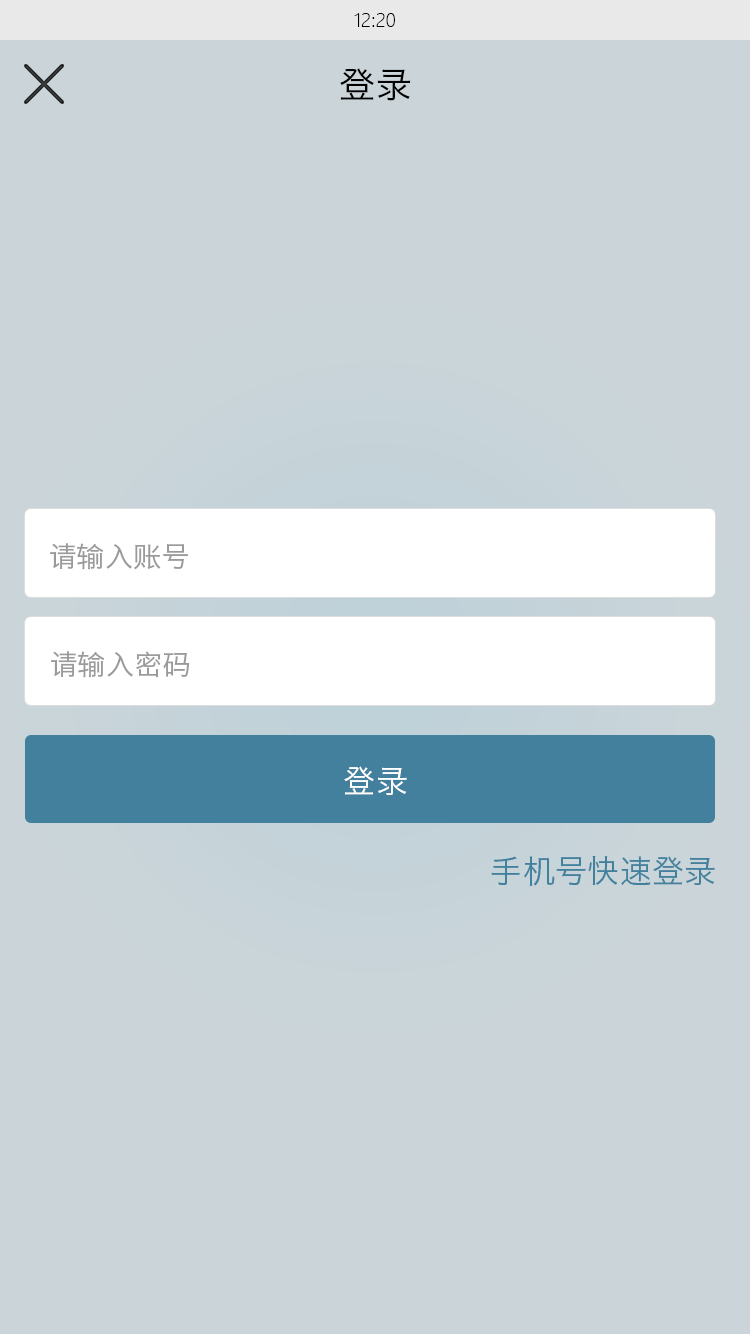
<style>
.page{position:relative;width:750px;height:1334px;background:#cbd5d9}
.page>*{position:absolute;margin:0}
.t1{font:18px "MicrosoftYaHeiLight";color:#000000}
.t2{font:36px "HiraginoSansGB-W3";color:#000000}
.t3{font:28px "HiraginoSansGB-W3";color:#9a9a9a}
.t4{font:32px "HiraginoSansGB-W3";color:#ffffff}
.t5{font:32px "HiraginoSansGB-W3";color:#42819d}
</style>
<div class="page">
<p class="t1" style="left:354px;top:13px;width:41px;height:14px">12:20</p>
<p class="t2" style="left:340px;top:68px;width:71px;height:33px">登录</p>
<p class="t3" style="left:50px;top:543px;width:138px;height:27px">请输入账号</p>
<p class="t3" style="left:51px;top:651px;width:139px;height:27px">请输入密码</p>
<p class="t4" style="left:344px;top:766px;width:63px;height:29px">登录</p>
<p class="t5" style="left:491px;top:856px;width:224px;height:30px">手机号快速登录</p>
</div>
